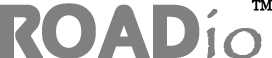
<style>
.page{position:relative;width:272px;height:58px;background:#ffffff}
.page>*{position:absolute;margin:0}
.t1{font:76.4px "Queen-of-Camelot";color:#808080;font-weight:bold}
.t2{font:76.4px "Papyrus-Regular";color:#808080;font-weight:bold}
.t3{font:12.5px "Georgia";color:#000000;font-weight:bold}
</style>
<div class="page">
<p class="t1" style="left:0px;top:3px;width:262px;height:55px">Road<span class="t2">io</span></p>
<p class="t3" style="left:251px;top:0px;width:21px;height:11px">TM</p>
</div>
